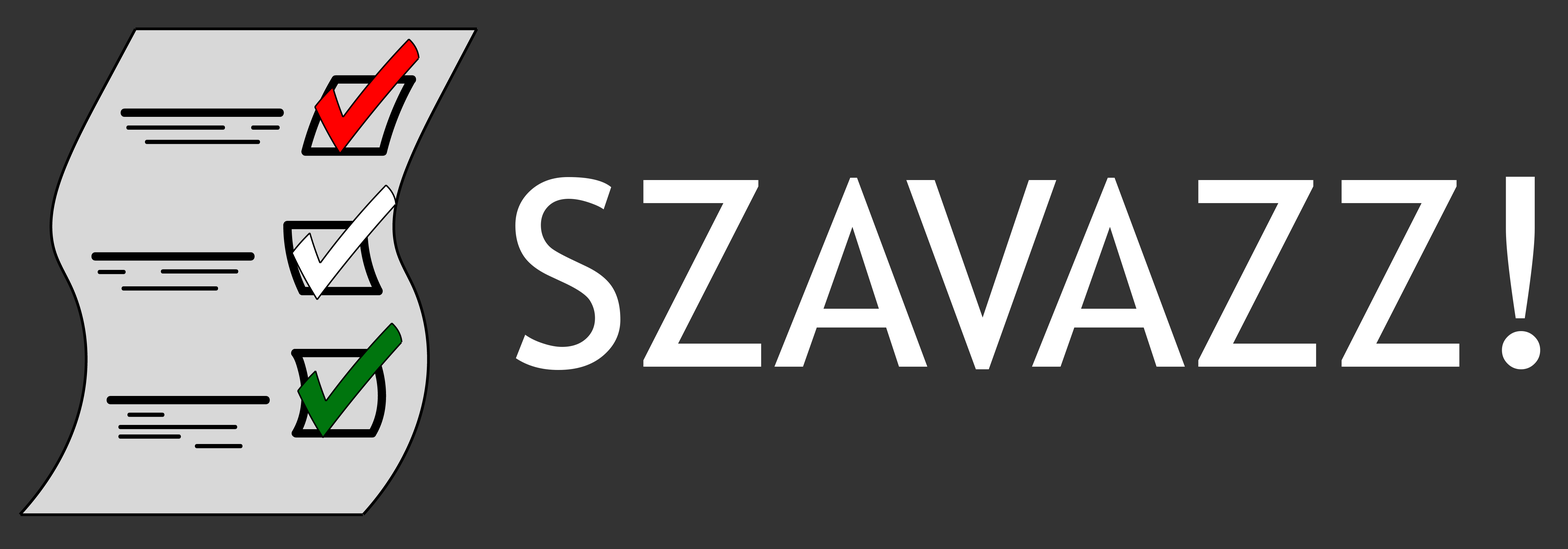
<style>
.page{position:relative;width:1568px;height:549px;background:#333333}
.page>*{position:absolute;margin:0}
.t1{font:260.7px "TrebuchetMS";color:#ffffff}
</style>
<div class="page">
<p class="t1" style="left:515px;top:177px;width:1025px;height:193px">SZAVAZZ!</p>
</div>
